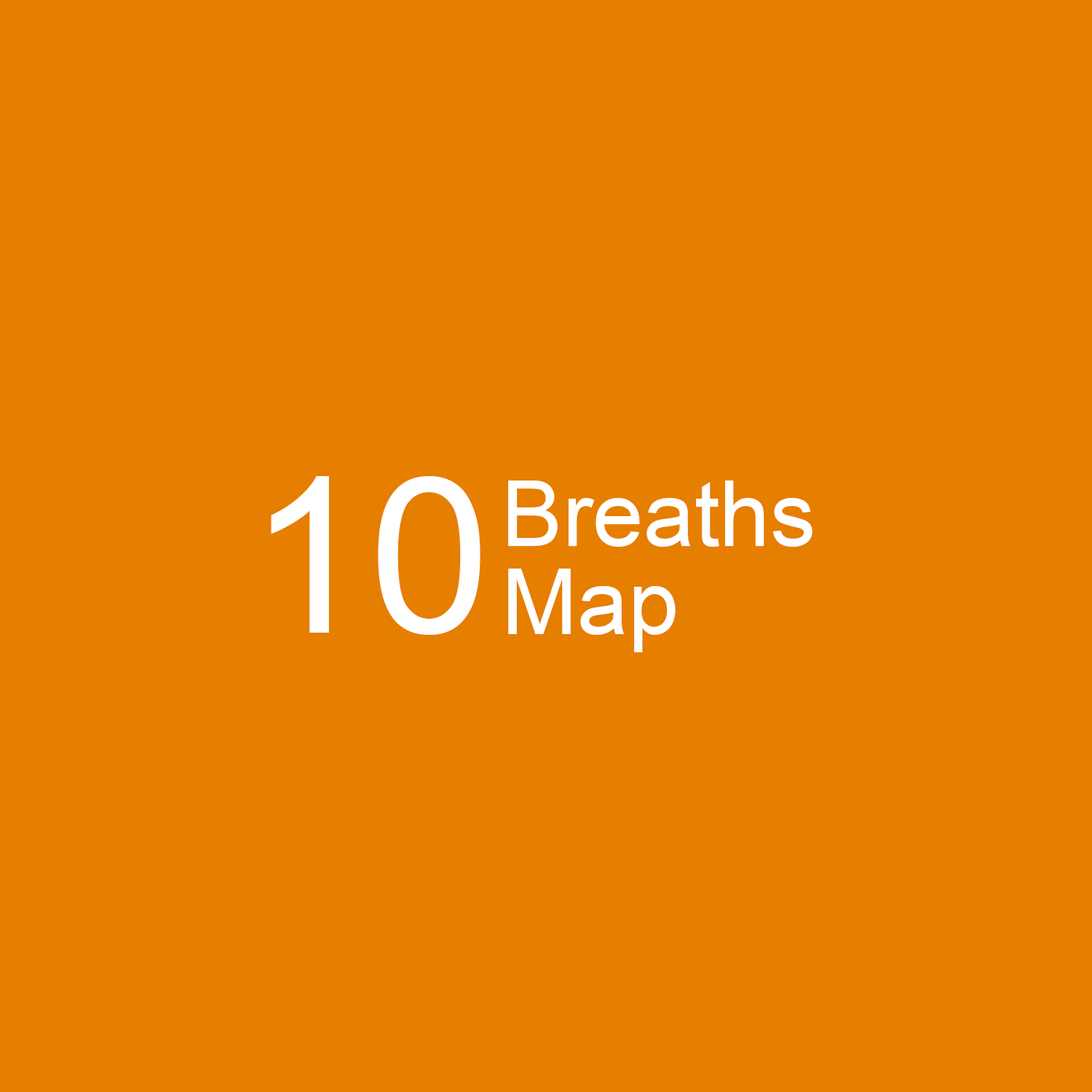
<style>
.page{position:relative;width:1092px;height:1092px;background:#e67e00}
.page>*{position:absolute;margin:0}
.t1{font:218.4px "ArialMT";color:#ffffff}
.t2{font:91px "ArialMT";color:#ffffff}
</style>
<div class="page">
<p class="t1" style="left:271px;top:476px;width:209px;height:159px">10</p>
<p class="t2" style="left:508px;top:480px;width:304px;height:67px">Breaths</p>
<p class="t2" style="left:508px;top:569px;width:168px;height:83px">Map</p>
</div>
